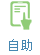
<style>
.page{position:relative;width:40px;height:55px;background:#ffffff}
.page>*{position:absolute;margin:0}
.t1{font:22.5px "SimSun";letter-spacing:0.01em;color:#4788b2;font-variant:small-caps}
</style>
<div class="page">
<p class="t1" style="left:9px;top:39px;width:23px;height:12px">自助</p>
</div>
